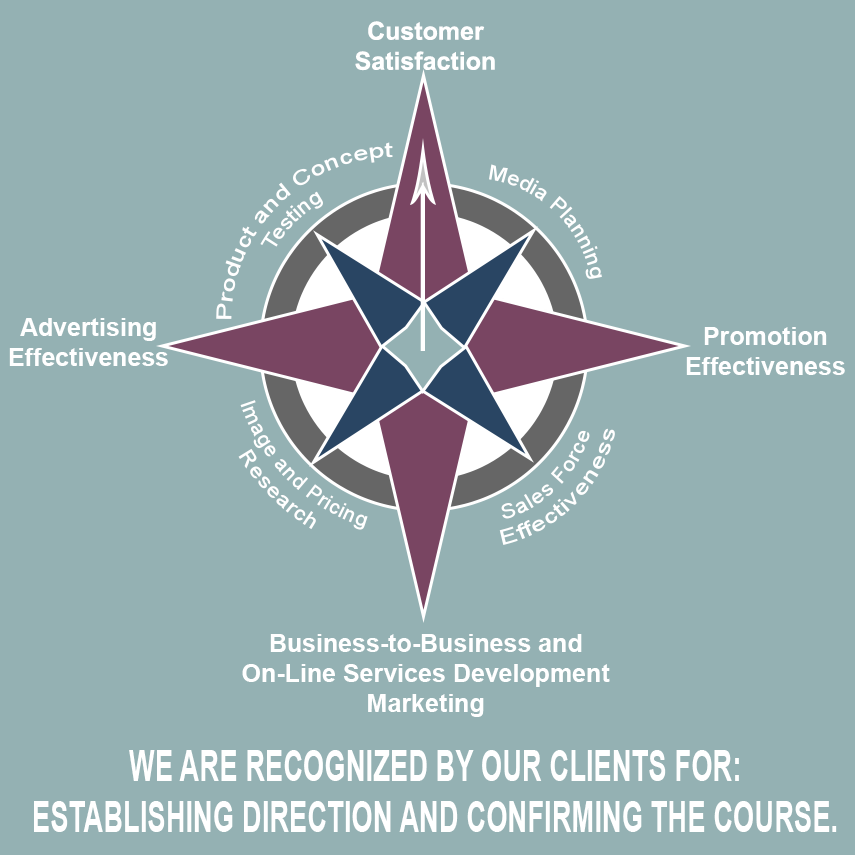
<style>
.page{position:relative;width:855px;height:855px;background:#94b1b3}
.page>*{position:absolute;margin:0}
.t1{font:25px "Arial-BoldMT";color:#ffffff}
.t2{font:20px "ArialMT";color:#ffffff}
.t3{font:42.7px "Arial-BoldMT";color:#ffffff;scale:0.64 1}
</style>
<div class="page">
<p class="t1" style="left:355px;top:21px;width:140px;height:50px;text-align:center">Customer<br>Satisfaction</p>
<p class="t2" style="left:216px;top:142px;width:177px;height:177px;text-align:center;rotate:-45deg">Product and Concept<br>Testing</p>
<p class="t2" style="left:489px;top:164px;width:113px;height:115px;rotate:44deg">Media Planning</p>
<p class="t1" style="left:9px;top:318px;width:159px;height:48px;text-align:center">Advertising<br>Effectiveness</p>
<p class="t1" style="left:686px;top:327px;width:159px;height:48px;text-align:center">Promotion<br>Effectiveness</p>
<p class="t2" style="left:238px;top:400px;width:130px;height:130px;text-align:center;rotate:45deg">Image and Pricing<br>Research</p>
<p class="t2" style="left:499px;top:428px;width:116px;height:117px;text-align:center;rotate:-45deg">Sales Force<br> Effectiveness</p>
<p class="t1" style="left:242px;top:634px;width:368px;height:83px;text-align:center">Business-to-Business and<br>On-Line Services Development<br>Marketing</p>
<p class="t3" style="left:34px;top:750px;width:803px;height:82px;text-align:center">WE ARE RECOGNIZED BY OUR CLIENTS FOR:<br>ESTABLISHING DIRECTION AND CONFIRMING THE COURSE.</p>
</div>
